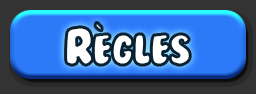
<style>
.page{position:relative;width:256px;height:94px;background:#333333}
.page>*{position:absolute;margin:0}
.t1{font:41px "BubbleGum";letter-spacing:-0.035em;color:#ffffff}
.t2{font:49.1px "BubbleGum";letter-spacing:-0.035em;color:#ffffff}
</style>
<div class="page">
<p class="t1" style="left:65px;top:27px;width:126px;height:38px"><span class="t2">R</span>Egles</p>
</div>
